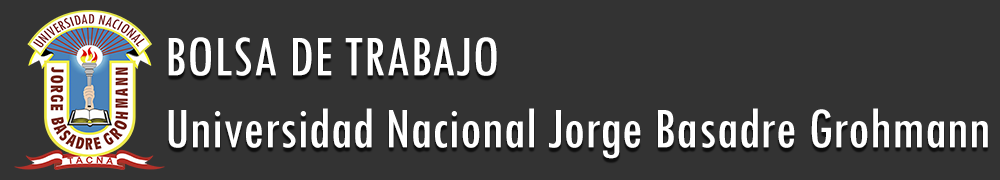
<style>
.page{position:relative;width:1000px;height:180px;background:#333333}
.page>*{position:absolute;margin:0}
.t1{font:60px "TwCenMT-Condensed";color:#ffffff}
</style>
<div class="page">
<p class="t1" style="left:168px;top:37px;width:820px;height:122px">BOLSA DE TRABAJO<br>Universidad Nacional Jorge Basadre Grohmann</p>
</div>
